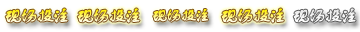
<style>
.page{position:relative;width:360px;height:32px;background:#ffffff}
.page>*{position:absolute;margin:0}
.t1{font:18px "FZSTK--GBK1-0";letter-spacing:-0.14em;font-weight:bold}
.t2{font:16px "FZSTK--GBK1-0";letter-spacing:-0.14em;font-weight:bold}
.t3{font:18px "FZSTK--GBK1-0";letter-spacing:-0.14em;color:#f1f1f1;font-weight:bold}
</style>
<div class="page">
<p class="t1" style="left:5px;top:8px;width:63px;height:15px">现场投注</p>
<p class="t1" style="left:77px;top:8px;width:63px;height:15px">现场投注</p>
<p class="t2" style="left:153px;top:9px;width:55px;height:13px">现场投注</p>
<p class="t1" style="left:221px;top:8px;width:63px;height:15px">现场投注</p>
<p class="t3" style="left:293px;top:8px;width:63px;height:15px">现场投注</p>
</div>
